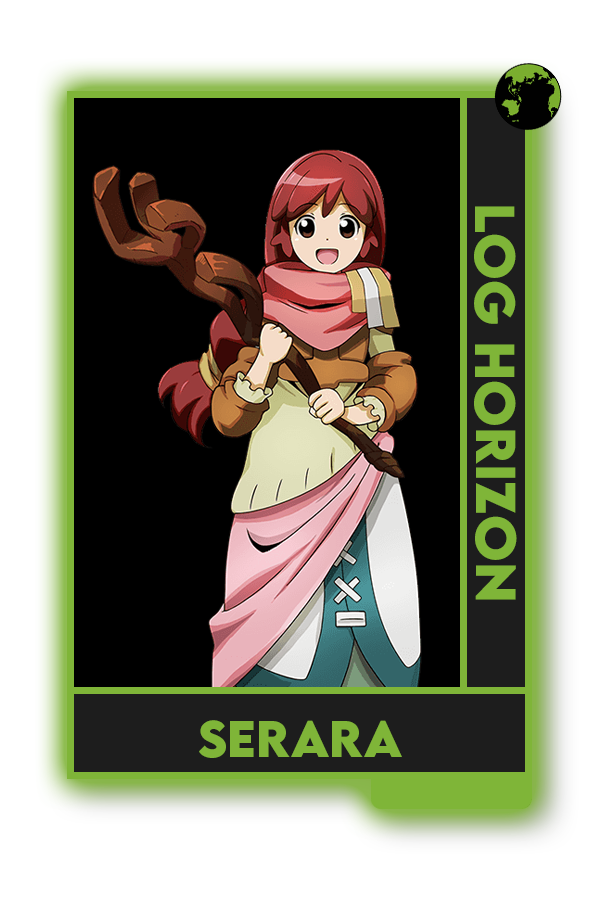
<style>
.page{position:relative;width:600px;height:900px;background:#000000}
.page>*{position:absolute;margin:0}
.t1{font:50px "LEMONMILK-Bold";color:#7fad41}
.t2{font:45.8px "LEMONMILK-Bold";color:#7fad41}
</style>
<div class="page">
<p class="t1" style="left:474px;top:206px;width:43px;height:394px;rotate:90deg">Log Horizon</p>
<p class="t2" style="left:199px;top:720px;width:203px;height:38px">Serara</p>
</div>
